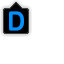
<style>
.page{position:relative;width:64px;height:64px;background:#ffffff}
.page>*{position:absolute;margin:0}
.t1{font:26.8px "ArialRoundedMTBold";color:#0090ff;text-transform:uppercase;scale:0.92 1}
</style>
<div class="page">
<p class="t1" style="left:9px;top:11px;width:15px;height:20px">D</p>
</div>
